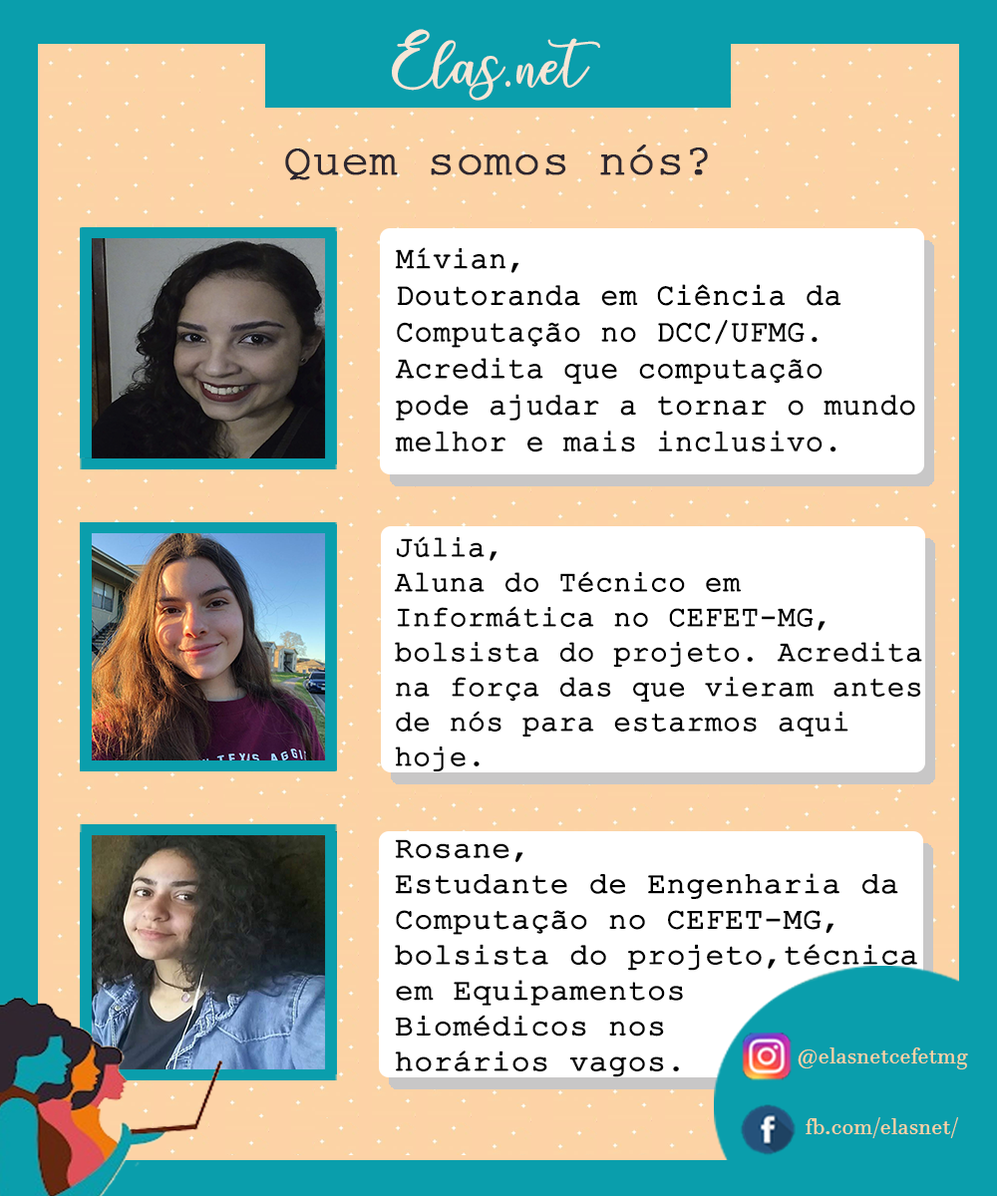
<style>
.page{position:relative;width:997px;height:1196px;background:#ffffff}
.page>*{position:absolute;margin:0}
.t1{font:55.8px "charlinda-Regular";color:#f7e6d6}
.t2{font:45.7px "CourierNewPSMT";color:#2e272f;font-weight:bold}
.t3{font:30.5px "CourierNewPSMT";color:#000000;font-weight:bold}
.t4{font:29.1px "CourierNewPSMT";color:#000000;font-weight:bold}
.t5{font:29.6px "CourierNewPSMT";color:#000000;font-weight:bold;scale:1.05 1}
.t6{font:23.3px "JavaneseText";color:#fcd3a5}
</style>
<div class="page">
<p class="t1" style="left:392px;top:29px;width:208px;height:72px">Elas.net</p>
<p class="t2" style="left:285px;top:145px;width:423px;height:35px">Quem somos nós?</p>
<p class="t3" style="left:395px;top:247px;width:520px;height:206px">Mívian,<br>Doutoranda em Ciência da<br>Computação no DCC/UFMG.<br>Acredita que computação<br>pode ajudar a tornar o mundo<br>melhor e mais inclusivo.</p>
<p class="t4" style="left:394px;top:536px;width:528px;height:236px">Júlia,<br>Aluna do Técnico em <br>Informática no CEFET-MG, <br>bolsista do projeto. Acredita <br>na força das que vieram antes <br>de nós para estarmos aqui <br>hoje.</p>
<p class="t5" style="left:395px;top:839px;width:522px;height:239px">Rosane,<br>Estudante de Engenharia da<br>Computação no CEFET-MG,<br>bolsista do projeto,técnica<br>em Equipamentos <br>Biomédicos nos<br>horários vagos.</p>
<p class="t6" style="left:797px;top:1048px;width:171px;height:22px">@elasnetcefetmg</p>
<p class="t6" style="left:805px;top:1117px;width:153px;height:21px">fb.com/elasnet/</p>
</div>
